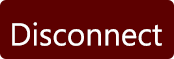
<style>
.page{position:relative;width:174px;height:59px;background:#5d0000}
.page>*{position:absolute;margin:0}
.t1{font:29.2px "MicrosoftJhengHeiUIRegular";color:#ffffff}
</style>
<div class="page">
<p class="t1" style="left:12px;top:22px;width:150px;height:24px">Disconnect</p>
</div>
